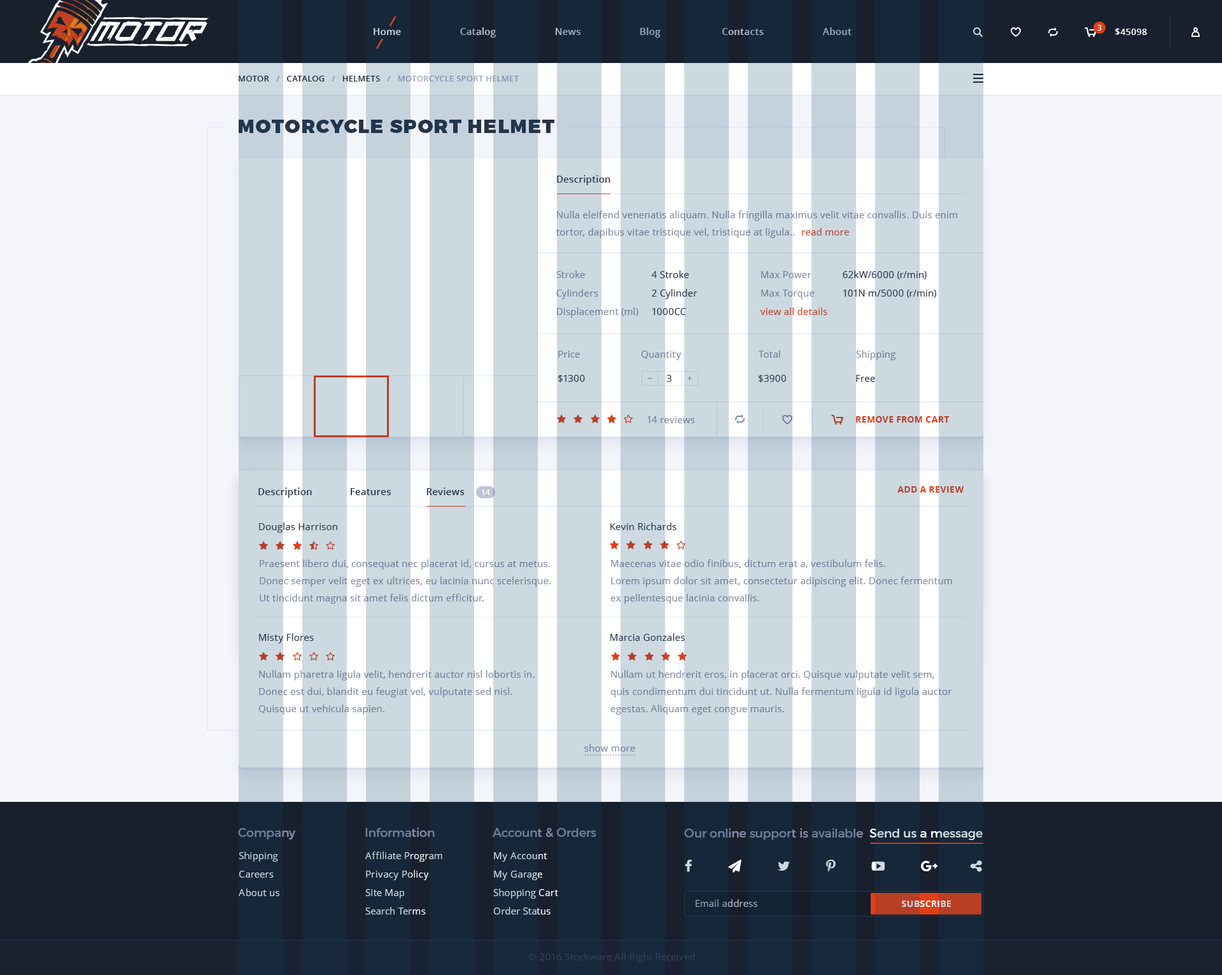
<style>
.page{position:relative;width:1222px;height:975px;background:#f4f5fb}
.page>*{position:absolute;margin:0}
.t1{font:9.6px "OpenSans-Semibold";letter-spacing:0.02em}
.t2{font:7.6px "OpenSans-Bold";color:#ffffff}
.t3{font:8.9px "OpenSans-Semibold";letter-spacing:0.02em;color:#ffffff;text-transform:uppercase}
.t4{font:8.3px "OpenSans-Semibold";letter-spacing:0.02em;text-transform:uppercase}
.t5{font:19.1px "Montserrat-Black";letter-spacing:0.06em;color:#283346;text-transform:uppercase}
.t6{font:9.6px "OpenSans-Semibold";letter-spacing:0.02em;color:#283346}
.t7{font:9.6px/17.2px "OpenSans";letter-spacing:0.02em;color:#6d7d99}
.t8{font:9.6px "OpenSans";letter-spacing:0.02em;color:#b83f25}
.t9{font:9.6px/18.5px "OpenSans";letter-spacing:0.02em;color:#6d7d99}
.t10{font:9.6px/18.5px "OpenSans";letter-spacing:0.02em;color:#283346}
.t11{font:9.6px/18.5px "OpenSans";letter-spacing:0.02em}
.t12{font:9.6px/18.5px "TimesNewRomanPSMT";letter-spacing:0.02em;color:#283346}
.t13{font:9.6px "OpenSans";letter-spacing:0.02em;color:#6d7d99}
.t14{font:9.6px "OpenSans";letter-spacing:0.02em}
.t15{font:9.6px "OpenSans";letter-spacing:0.02em;color:#868ca7}
.t16{font:9.6px "OpenSans";letter-spacing:0.02em;color:#283346}
.t17{font:8.9px "OpenSans-Bold";letter-spacing:0.02em;text-transform:uppercase}
.t18{font:7.6px "OpenSans-Bold";letter-spacing:0.02em;color:#ffffff}
.t19{font:8.3px "OpenSans-Semibold";letter-spacing:0.02em;color:#ffffff;text-transform:uppercase}
.t20{font:9.6px/17.2px "OpenSans";letter-spacing:0.02em}
.t21{font:12.1px "Montserrat-Regular";color:#6d7d99}
.t22{font:12.1px "Montserrat-Regular"}
.t23{font:9.6px/18.5px "OpenSans";letter-spacing:0.02em;color:#cdd9e0}
.t24{font:8.9px "OpenSans-Bold";letter-spacing:0.02em}
.t25{font:9.6px "OpenSans";letter-spacing:0.02em;color:#324057}
</style>
<div class="page">
<p class="t1" style="left:374px;top:27px;width:478px;height:11px">Home                      Catalog                      News                      Blog                       Contacts                      About</p>
<p class="t2" style="left:1098px;top:25px;width:4px;height:6px">3</p>
<p class="t3" style="left:1116px;top:28px;width:31px;height:7px">$45098</p>
<p class="t4" style="left:239px;top:76px;width:280px;height:5px">Motor   /   Catalog   /   Helmets   /   Motorcycle sport helmet</p>
<p class="t5" style="left:239px;top:120px;width:316px;height:13px">Motorcycle sport helmet</p>
<p class="t6" style="left:557px;top:175px;width:54px;height:10px">Description</p>
<p class="t7" style="left:556px;top:211px;width:402px;height:27px;text-align:justify">Nulla eleifend venenatis aliquam. Nulla fringilla maximus velit vitae convallis. Duis enim <br>tortor, dapibus vitae tristique vel, tristique at ligula..</p>
<p class="t8" style="left:802px;top:228px;width:47px;height:8px">read more</p>
<p class="t9" style="left:556px;top:271px;width:83px;height:47px;text-align:justify">Stroke<br>Cylinders<br>Displacement (ml)</p>
<p class="t10" style="left:651px;top:271px;width:47px;height:44px;text-align:justify">4 Stroke<br>2 Cylinder<br>1000CC</p>
<p class="t11" style="left:760px;top:271px;width:68px;height:44px;text-align:justify">Max Power<br>Max Torque<br>view all details</p>
<p class="t10" style="left:843px;top:271px;width:94px;height:27px;text-align:justify">62kW/6000 (r/min)<br>101N<span class="t12">·</span>m/5000 (r/min)</p>
<p class="t13" style="left:558px;top:351px;width:22px;height:7px">Price</p>
<p class="t14" style="left:641px;top:351px;width:41px;height:9px">Quantity</p>
<p class="t13" style="left:759px;top:350px;width:22px;height:8px">Total</p>
<p class="t15" style="left:856px;top:350px;width:40px;height:10px">Shipping</p>
<p class="t16" style="left:558px;top:375px;width:27px;height:8px">$1300</p>
<p class="t16" style="left:667px;top:375px;width:5px;height:7px">3</p>
<p class="t16" style="left:758px;top:375px;width:28px;height:8px">$3900</p>
<p class="t16" style="left:856px;top:375px;width:19px;height:7px">Free</p>
<p class="t14" style="left:648px;top:416px;width:47px;height:7px">14 reviews</p>
<p class="t17" style="left:856px;top:416px;width:94px;height:7px">remove from cart</p>
<p class="t6" style="left:259px;top:488px;width:206px;height:10px">Description              Features             Reviews</p>
<p class="t6" style="left:259px;top:488px;width:206px;height:10px">Description              Features             Reviews</p>
<p class="t6" style="left:259px;top:488px;width:206px;height:10px">Description              Features             Reviews</p>
<p class="t18" style="left:481px;top:490px;width:9px;height:5px">14</p>
<p class="t18" style="left:481px;top:490px;width:9px;height:5px">14</p>
<p class="t19" style="left:481px;top:490px;width:9px;height:5px">14</p>
<p class="t17" style="left:898px;top:486px;width:66px;height:7px">add a review</p>
<p class="t16" style="left:259px;top:523px;width:78px;height:10px">Douglas Harrison</p>
<p class="t16" style="left:611px;top:523px;width:66px;height:7px">Kevin Richards</p>
<p class="t7" style="left:260px;top:560px;width:291px;height:44px;text-align:justify">Praesent libero dui, consequat nec placerat id, cursus at metus. <br>Donec semper velit eget ex ultrices, eu lacinia nunc scelerisque. <br>Ut tincidunt magna sit amet felis dictum efficitur.</p>
<p class="t7" style="left:611px;top:560px;width:342px;height:44px;text-align:justify">Maecenas vitae odio finibus, dictum erat a, vestibulum felis. <br>Lorem ipsum dolor sit amet, consectetur adipiscing elit. Donec fermentum <br>ex pellentesque lacinia convallis.</p>
<p class="t16" style="left:259px;top:634px;width:55px;height:10px">Misty Flores</p>
<p class="t16" style="left:611px;top:634px;width:74px;height:7px">Marcia Gonzales</p>
<p class="t20" style="left:259px;top:670px;width:276px;height:45px;text-align:justify">Nullam pharetra ligula velit, hendrerit auctor nisl lobortis in. <br>Donec est dui, blandit eu feugiat vel, vulputate sed nisl. <br>Quisque ut vehicula sapien.</p>
<p class="t20" style="left:611px;top:670px;width:342px;height:45px;text-align:justify">Nullam ut hendrerit eros, in placerat orci. Quisque vulputate velit sem, <br>quis condimentum dui tincidunt ut. Nulla fermentum ligula id ligula auctor <br>egestas. Aliquam eget congue mauris.</p>
<p class="t13" style="left:584px;top:744px;width:51px;height:8px">show more</p>
<p class="t21" style="left:238px;top:828px;width:57px;height:12px">Company</p>
<p class="t21" style="left:365px;top:828px;width:70px;height:9px">Information</p>
<p class="t21" style="left:493px;top:828px;width:104px;height:10px">Account &amp; Orders</p>
<p class="t22" style="left:684px;top:828px;width:299px;height:12px">Our online support is available  Send us a message</p>
<p class="t23" style="left:239px;top:852px;width:41px;height:44px">Shipping<br>Careers<br>About us</p>
<p class="t23" style="left:365px;top:852px;width:78px;height:63px">Affiliate Program<br>Privacy Policy<br>Site Map<br>Search Terms</p>
<p class="t23" style="left:493px;top:853px;width:65px;height:62px">My Account<br>My Garage<br>Shopping Cart<br>Order Status</p>
<p class="t14" style="left:696px;top:900px;width:62px;height:7px">Email address</p>
<p class="t24" style="left:902px;top:901px;width:49px;height:6px">SUBSCRIBE</p>
<p class="t25" style="left:528px;top:953px;width:167px;height:10px">© 2016 Stockware All Right Received</p>
</div>
